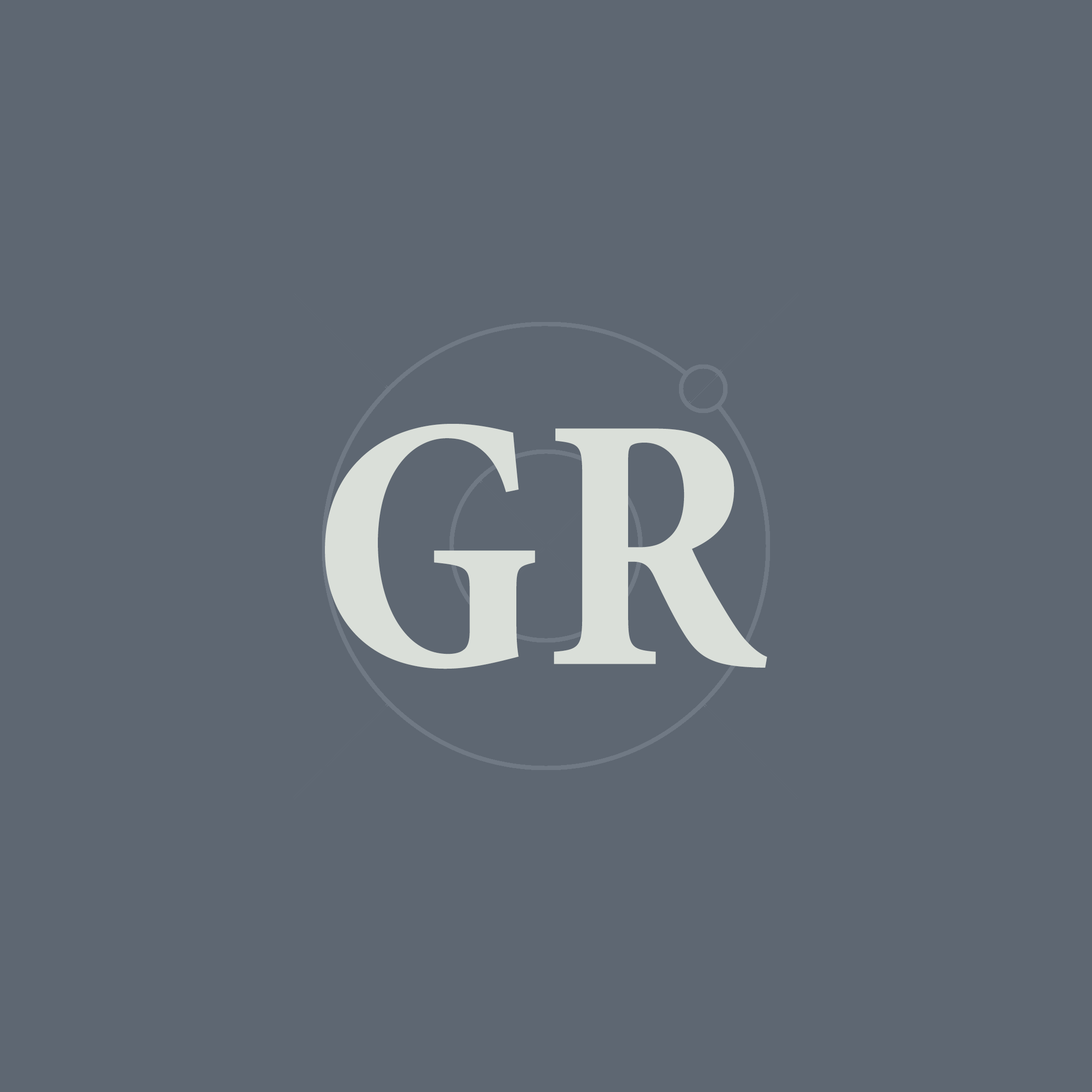
<style>
.page{position:relative;width:1092px;height:1092px;background:#5e6772}
.page>*{position:absolute;margin:0}
.t1{font:366.5px "MinionPro-BoldCn";color:#dadfd9;text-transform:uppercase}
</style>
<div class="page">
<p class="t1" style="left:325px;top:424px;width:442px;height:245px">Gr</p>
</div>
